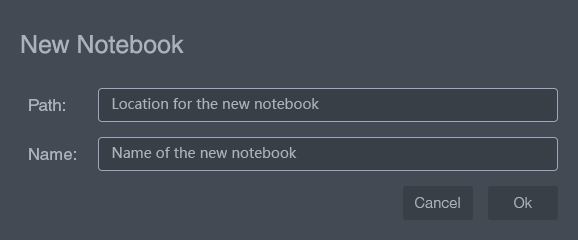
<style>
.page{position:relative;width:578px;height:240px;background:#434a54}
.page>*{position:absolute;margin:0}
.t1{font:25px "Helvetica";color:#aab2bd}
.t2{font:16.7px "Helvetica";color:#aab2bd}
.t3{font:14px "MicrosoftYaHei";color:#aab2bd}
.t4{font:14.6px "HelveticaLight";color:#aab2bd}
</style>
<div class="page">
<p class="t1" style="left:21px;top:35px;width:163px;height:19px">New Notebook</p>
<p class="t2" style="left:29px;top:99px;width:36px;height:12px">Path:</p>
<p class="t3" style="left:112px;top:98px;width:207px;height:11px">Location for the new notebook</p>
<p class="t2" style="left:29px;top:148px;width:47px;height:12px">Name:</p>
<p class="t3" style="left:112px;top:147px;width:185px;height:11px">Name of the new notebook</p>
<p class="t4" style="left:415px;top:197px;width:45px;height:11px">Cancel</p>
<p class="t4" style="left:514px;top:197px;width:18px;height:11px">Ok</p>
</div>
